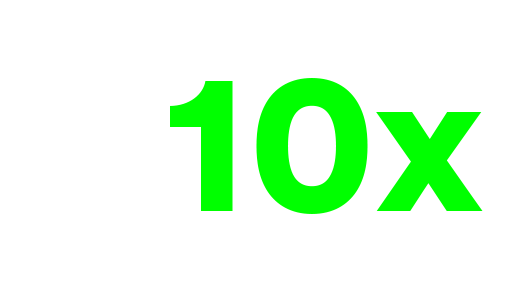
<style>
.page{position:relative;width:512px;height:281px;background:#ffffff}
.page>*{position:absolute;margin:0}
.t1{font:200px "CircularStd-Black";color:#00ff00}
</style>
<div class="page">
<p class="t1" style="left:170px;top:78px;width:313px;height:136px">10x</p>
</div>
